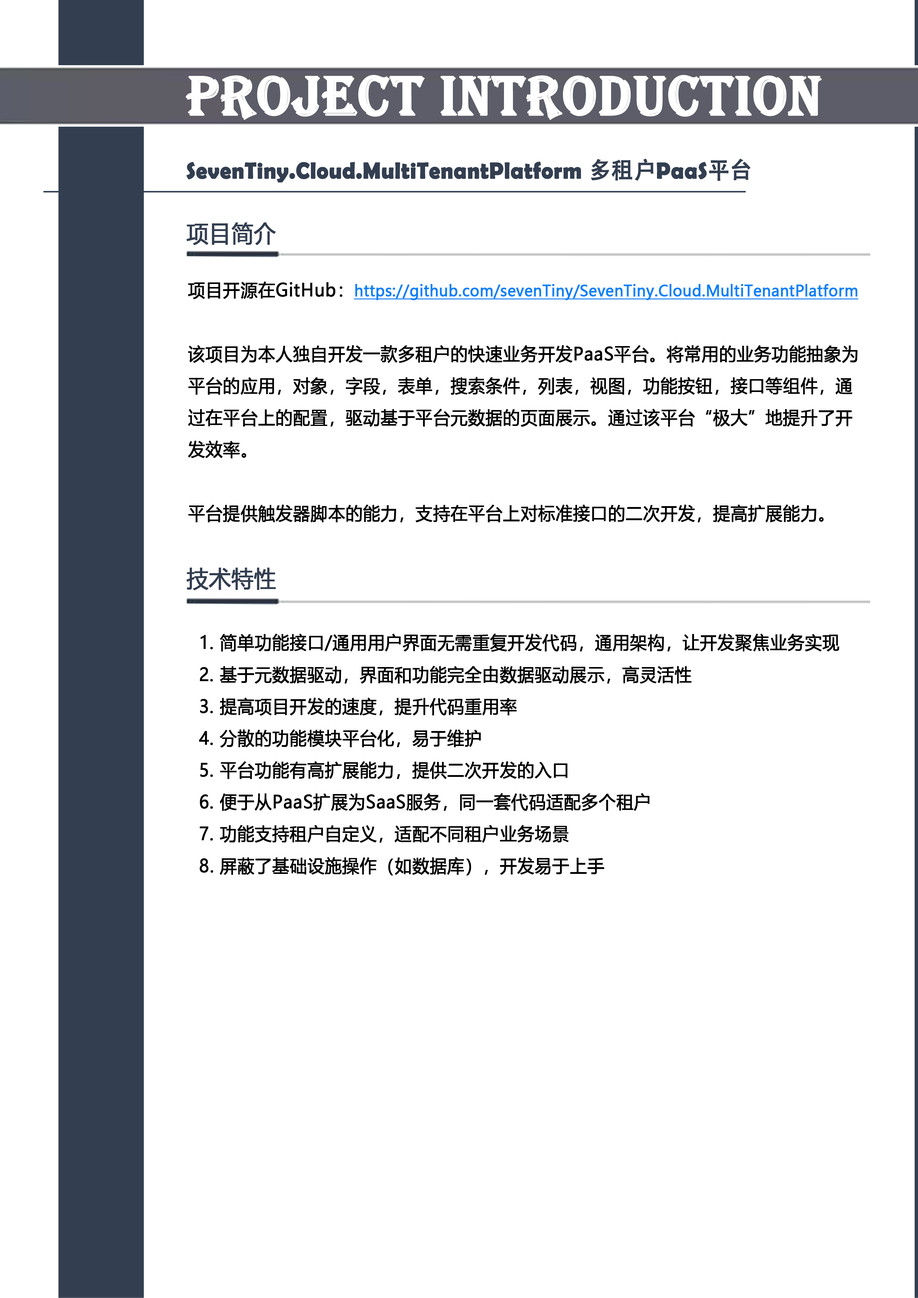
<style>
.page{position:relative;width:918px;height:1298px;background:#ffffff}
.page>*{position:absolute;margin:0}
.t1{font:57.4px "Algerian";letter-spacing:0.005em;color:#ffffff;font-weight:bold;scale:0.95 1}
.t2{font:23px "BerlinSansFBDemi-Bold";letter-spacing:0.005em;color:#333e50;font-weight:bold;scale:0.95 1}
.t3{font:23px "AdobeHeitiStd-Regular";letter-spacing:0.005em;color:#333e50;font-weight:bold;scale:0.95 1}
.t4{font:23px "MicrosoftYaHei";letter-spacing:0.005em;color:#333e50;font-weight:bold;scale:0.95 1}
.t5{font:17.9px/31.9px "MicrosoftYaHei";letter-spacing:0.005em;color:#000000;font-weight:bold;scale:0.95 1}
.t6{font:15.3px/28.1px "MicrosoftYaHei";letter-spacing:0.005em;color:#087ff9;font-weight:bold;text-decoration:underline;scale:0.95 1}
</style>
<div class="page">
<p class="t1" style="left:185px;top:75px;width:637px;height:45px">PROJECT INTRODUCTION</p>
<p class="t2" style="left:186px;top:159px;width:565px;height:24px">SevenTiny.Cloud.MultiTenantPlatform <span class="t3">多租户</span>PaaS<span class="t3">平台</span></p>
<p class="t4" style="left:186px;top:223px;width:90px;height:22px">项目简介</p>
<p class="t5" style="left:188px;top:282px;width:671px;height:241px">项目开源在GitHub：<span class="t6">https://github.com/sevenTiny/SevenTiny.Cloud.MultiTenantPlatform<br></span><br>该项目为本人独自开发一款多租户的快速业务开发PaaS平台。将常用的业务功能抽象为平台的应用，对象，字段，表单，搜索条件，列表，视图，功能按钮，接口等组件，通过在平台上的配置，驱动基于平台元数据的页面展示。通过该平台“极大”地提升了开发效率。<br><br>平台提供触发器脚本的能力，支持在平台上对标准接口的二次开发，提高扩展能力。</p>
<p class="t4" style="left:186px;top:568px;width:90px;height:22px">技术特性</p>
<p class="t5" style="left:199px;top:634px;width:641px;height:242px">1. 简单功能接口/通用用户界面无需重复开发代码，通用架构，让开发聚焦业务实现<br> 2. 基于元数据驱动，界面和功能完全由数据驱动展示，高灵活性<br> 3. 提高项目开发的速度，提升代码重用率<br> 4. 分散的功能模块平台化，易于维护<br> 5. 平台功能有高扩展能力，提供二次开发的入口<br> 6. 便于从PaaS扩展为SaaS服务，同一套代码适配多个租户<br> 7. 功能支持租户自定义，适配不同租户业务场景<br>  8. 屏蔽了基础设施操作（如数据库），开发易于上手</p>
</div>
